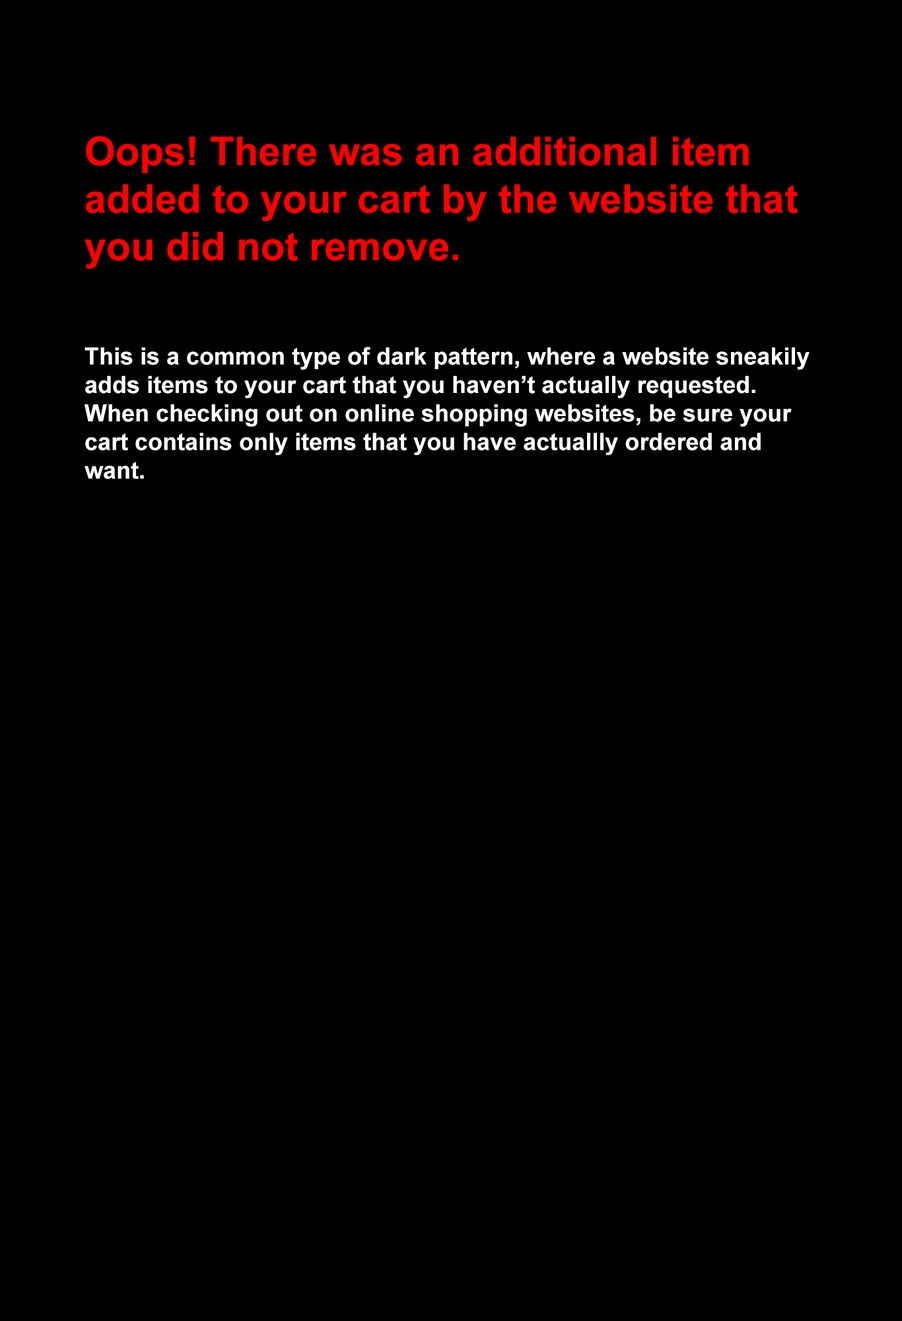
<style>
.page{position:relative;width:902px;height:1321px;background:#000000}
.page>*{position:absolute;margin:0}
.t1{font:39.6px "Arial-BoldMT";color:#ff0000}
.t2{font:23.8px "Arial-BoldMT";color:#ffffff}
</style>
<div class="page">
<p class="t1" style="left:85px;top:136px;width:713px;height:133px">Oops! There was an additional item added to your cart by the website that you did not remove.</p>
<p class="t2" style="left:85px;top:347px;width:725px;height:132px">This is a common type of dark pattern, where a website sneakily adds items to your cart that you haven’t actually requested. When checking out on online shopping websites, be sure your cart contains only items that you have actuallly ordered and want.</p>
</div>
